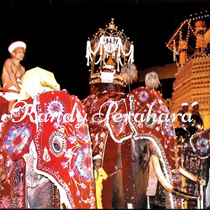
<style>
.page{position:relative;width:210px;height:210px}
.page>*{position:absolute;margin:0}
.t1{font:30px "Niconne-Regular";color:#f3f4f8}
</style>
<div class="page">
<p class="t1" style="left:11px;top:100px;width:183px;height:29px">Kandy Perahara</p>
</div>
